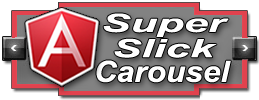
<style>
.page{position:relative;width:259px;height:100px;background:#ffffff}
.page>*{position:absolute;margin:0}
.t1{font:25.3px/10.9px "Arial-BoldItalicMT";color:#ffffff;scale:1.73 1}
.t2{font:25.3px/25.3px "Arial-BoldItalicMT";color:#ffffff;scale:1.73 1}
.t3{font:29.2px "Arial-BoldItalicMT";color:#ffffff;scale:1.08 1}
</style>
<div class="page">
<p class="t1" style="left:103px;top:13px;width:126px;height:45px;text-align:center">Super<br><span class="t2">Slick</span></p>
<p class="t3" style="left:96px;top:60px;width:135px;height:23px">Carousel</p>
</div>
